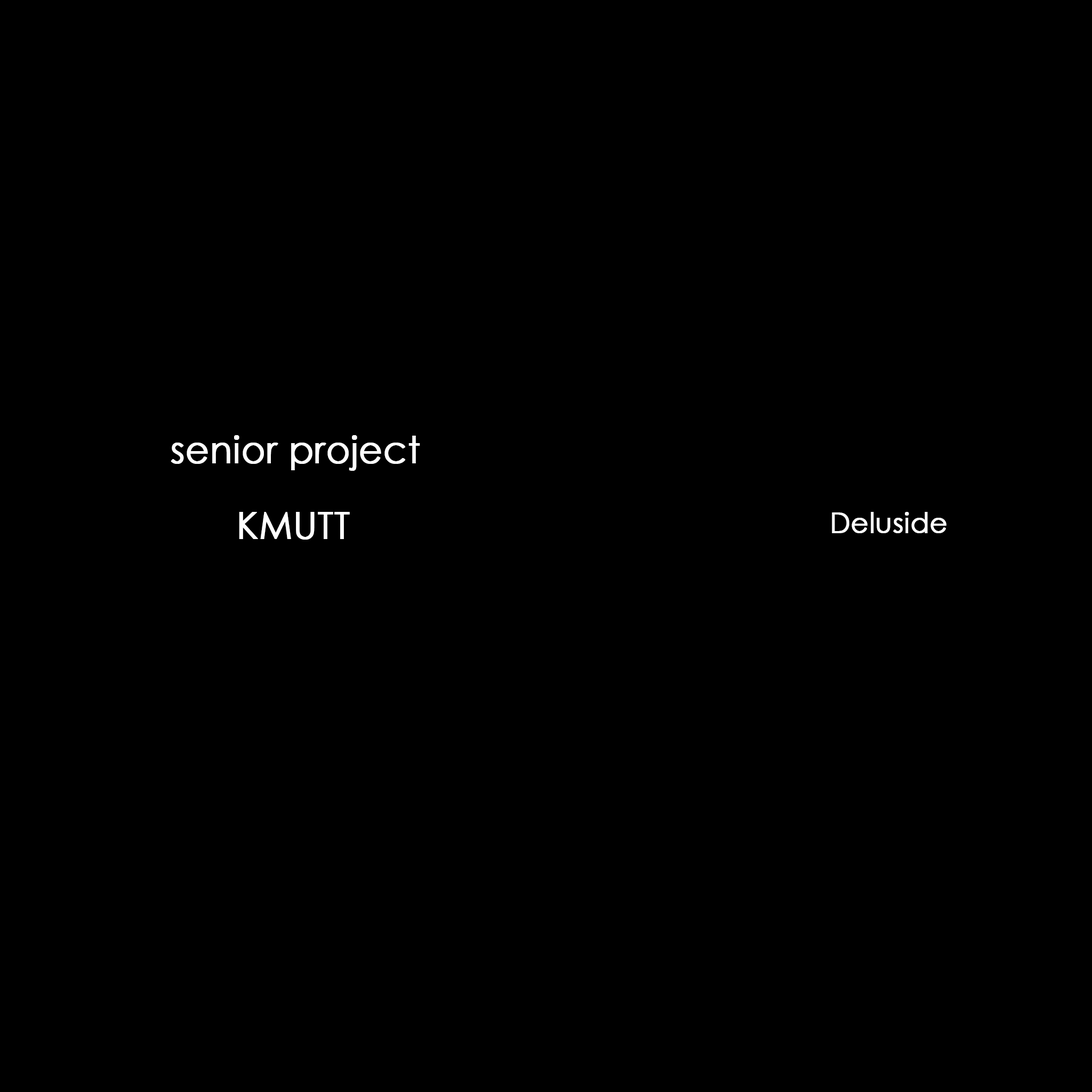
<style>
.page{position:relative;width:1092px;height:1092px;background:#000000}
.page>*{position:absolute;margin:0}
.t1{font:37px "CenturyGothic";color:#ffffff;font-weight:bold}
.t2{font:28px "CenturyGothic";color:#ffffff;font-weight:bold}
</style>
<div class="page">
<p class="t1" style="left:171px;top:435px;width:249px;height:36px">senior project</p>
<p class="t1" style="left:239px;top:512px;width:111px;height:28px">KMUTT</p>
<p class="t2" style="left:832px;top:512px;width:114px;height:21px">Deluside</p>
<p class="t2" style="left:832px;top:512px;width:114px;height:21px">Deluside</p>
</div>
